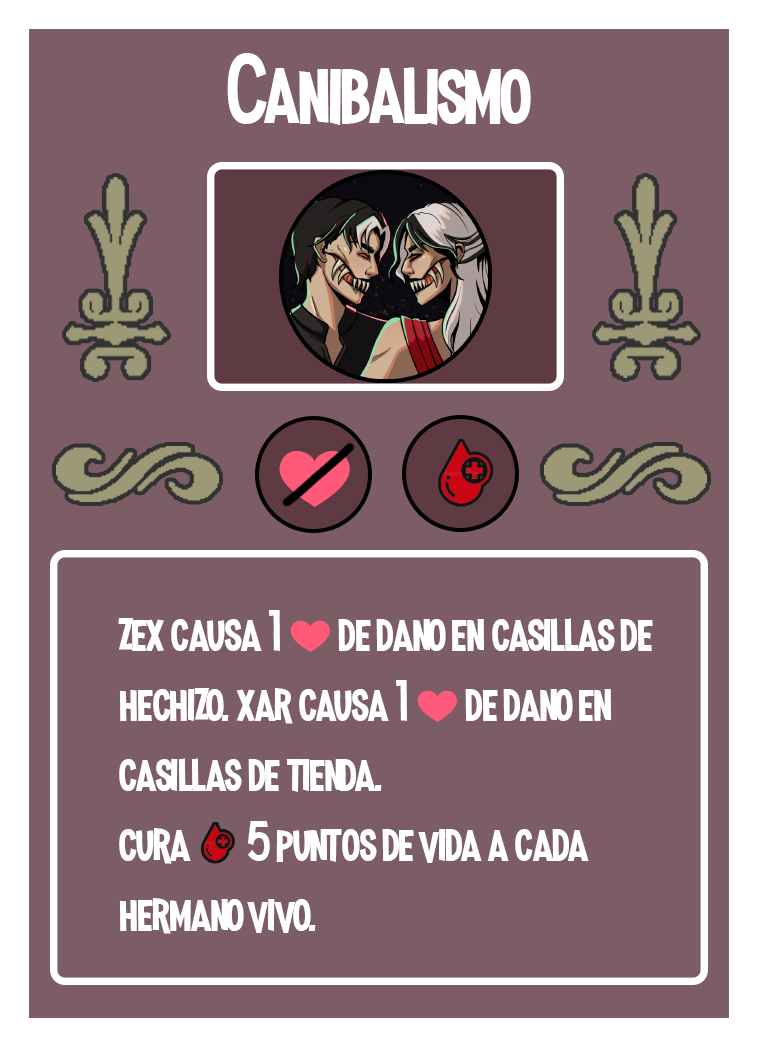
<style>
.page{position:relative;width:758px;height:1047px;background:#7d5d65}
.page>*{position:absolute;margin:0}
.t1{font:100px "MadnessHyperactive";color:#ffffff}
.t2{font:58.3px "MadnessHyperactive";color:#ffffff}
.t3{font:41.7px "EmojiOneColor";color:#ffffff}
</style>
<div class="page">
<p class="t1" style="left:227px;top:53px;width:304px;height:72px">Canibalismo</p>
<p class="t2" style="left:118px;top:610px;width:535px;height:324px">zex causa 1 <span class="t3">❤️ </span>de dano en casillas de hechizo. xar causa 1 <span class="t3">❤️ </span>de dano en casillas de tienda.<br>cura       5 puntos de vida a cada hermano vivo.</p>
</div>
